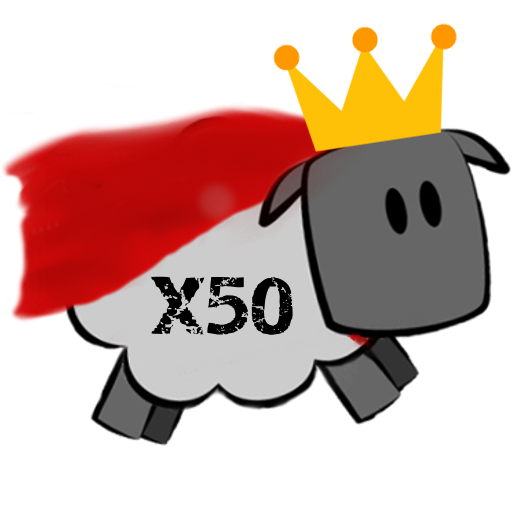
<style>
.page{position:relative;width:512px;height:512px;background:#ffffff}
.page>*{position:absolute;margin:0}
.t1{font:57.6px "Destroy";color:#000000}
</style>
<div class="page">
<p class="t1" style="left:150px;top:276px;width:143px;height:59px">x50</p>
</div>
